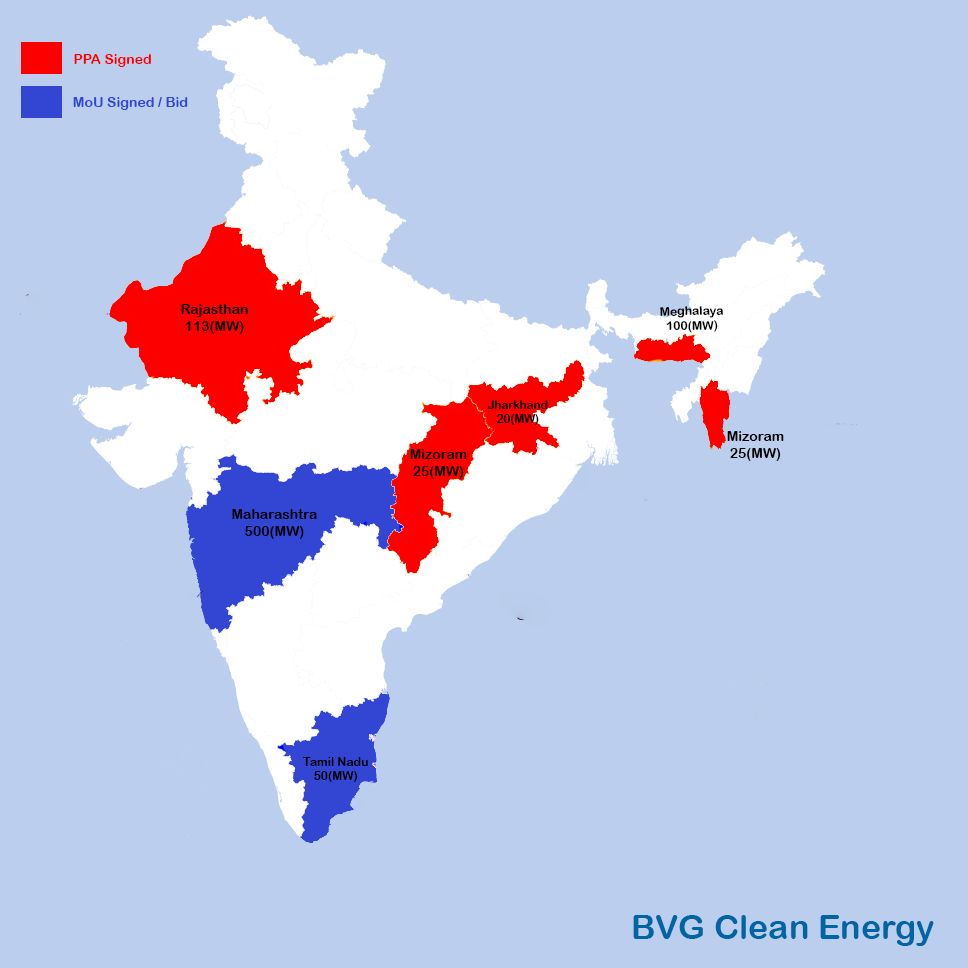
<style>
.page{position:relative;width:968px;height:968px;background:#bbceed}
.page>*{position:absolute;margin:0}
.t1{font:14px "ArialRoundedMTBold";color:#fc0000}
.t2{font:14px "ArialRoundedMTBold";color:#3246d3}
.t3{font:14px "ArialRoundedMTBold";color:#000000}
.t4{font:12.2px "ArialRoundedMTBold";color:#000000}
.t5{font:11.6px "ArialRoundedMTBold";color:#000000}
.t6{font:12px "ArialRoundedMTBold";color:#000000}
.t7{font:34px "ArialRoundedMTBold";color:#0065a3}
</style>
<div class="page">
<p class="t1" style="left:74px;top:54px;width:77px;height:13px">PPA Signed</p>
<p class="t2" style="left:73px;top:97px;width:115px;height:13px">MoU Signed / Bid</p>
<p class="t3" style="left:181px;top:304px;width:67px;height:30px;text-align:center">Rajasthan<br>113(MW)</p>
<p class="t4" style="left:660px;top:306px;width:63px;height:27px;text-align:center;rotate:-1deg">Meghalaya<br>100(MW)</p>
<p class="t5" style="left:488px;top:400px;width:60px;height:25px;text-align:center">Jharkhand<br>20(MW)</p>
<p class="t3" style="left:727px;top:431px;width:57px;height:30px;text-align:center">Mizoram<br>25(MW)</p>
<p class="t3" style="left:410px;top:449px;width:57px;height:30px;text-align:center">Mizoram<br>25(MW)</p>
<p class="t3" style="left:232px;top:509px;width:85px;height:30px;text-align:center">Maharashtra<br>500(MW)</p>
<p class="t6" style="left:303px;top:757px;width:65px;height:25px;text-align:center">Tamil Nadu<br>50(MW)</p>
<p class="t7" style="left:633px;top:915px;width:301px;height:31px">BVG Clean Energy</p>
</div>
